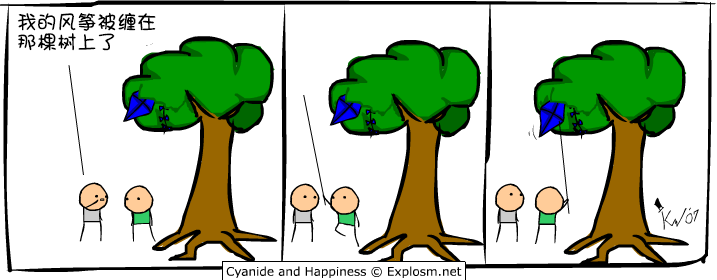
<style>
.page{position:relative;width:717px;height:280px;background:#ffffff}
.page>*{position:absolute;margin:0}
.t1{font:20px/20px "DFGirl";color:#000000}
</style>
<div class="page">
<p class="t1" style="left:17px;top:12px;width:139px;height:39px">我的风筝被缠在<br>那棵树上了</p>
</div>
